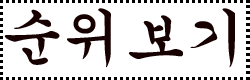
<style>
.page{position:relative;width:250px;height:80px;background:#ffffff}
.page>*{position:absolute;margin:0}
.t1{font:62px "H2gsrB";color:#170000}
</style>
<div class="page">
<p class="t1" style="left:4px;top:8px;width:231px;height:60px">순위보기</p>
</div>
